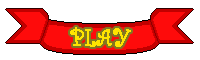
<style>
.page{position:relative;width:200px;height:60px;background:#ffffff}
.page>*{position:absolute;margin:0}
.t1{font:24px "CurlzMT";color:#ffe400;font-weight:bold}
</style>
<div class="page">
<p class="t1" style="left:70px;top:27px;width:61px;height:20px">PLAY</p>
</div>
